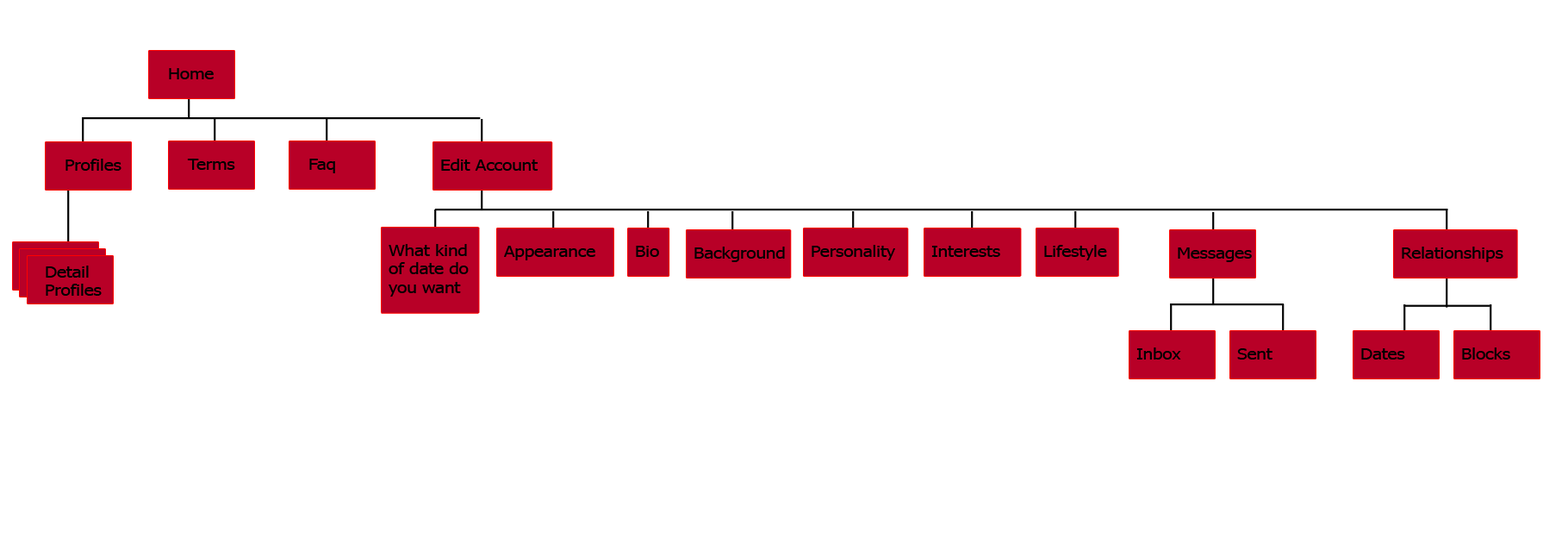
<style>
.page{position:relative;width:1568px;height:538px;background:#ffffff}
.page>*{position:absolute;margin:0}
.t1{font:15.5px "Tahoma";color:#000000;scale:1.14 1}
</style>
<div class="page">
<p class="t1" style="left:169px;top:68px;width:45px;height:11px">Home</p>
<p class="t1" style="left:65px;top:159px;width:56px;height:12px">Profiles</p>
<p class="t1" style="left:187px;top:159px;width:48px;height:11px">Terms</p>
<p class="t1" style="left:309px;top:159px;width:26px;height:14px">Faq</p>
<p class="t1" style="left:441px;top:159px;width:97px;height:12px">Edit Account</p>
<p class="t1" style="left:389px;top:244px;width:80px;height:52px">What kind of date do you want</p>
<p class="t1" style="left:504px;top:246px;width:91px;height:14px">Appearance</p>
<p class="t1" style="left:636px;top:246px;width:23px;height:11px">Bio</p>
<p class="t1" style="left:812px;top:245px;width:83px;height:15px">Personality</p>
<p class="t1" style="left:931px;top:246px;width:69px;height:11px">Interests</p>
<p class="t1" style="left:1044px;top:245px;width:63px;height:15px">Lifestyle</p>
<p class="t1" style="left:694px;top:246px;width:91px;height:16px">Background</p>
<p class="t1" style="left:1178px;top:247px;width:74px;height:15px">Messages</p>
<p class="t1" style="left:1402px;top:246px;width:101px;height:16px">Relationships</p>
<p class="t1" style="left:46px;top:265px;width:56px;height:31px">Detail<br>Profiles</p>
<p class="t1" style="left:1136px;top:347px;width:45px;height:12px">Inbox</p>
<p class="t1" style="left:1237px;top:348px;width:35px;height:11px">Sent</p>
<p class="t1" style="left:1361px;top:348px;width:44px;height:11px">Dates</p>
<p class="t1" style="left:1462px;top:347px;width:48px;height:12px">Blocks</p>
</div>
